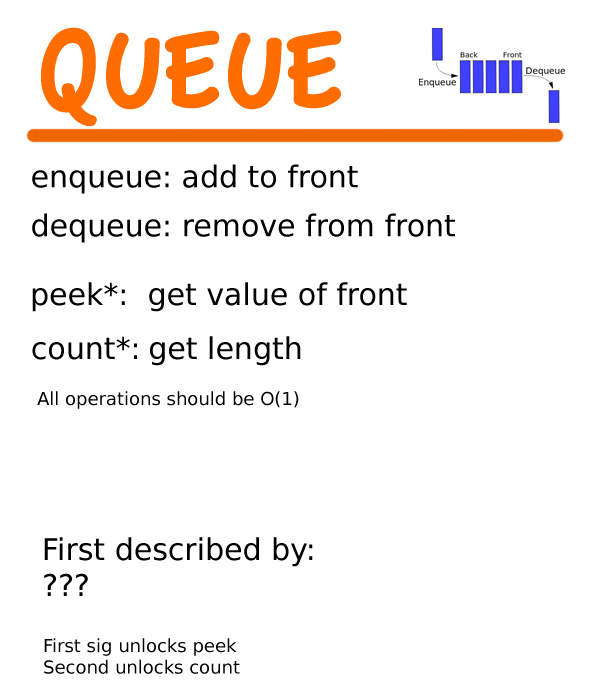
<style>
.page{position:relative;width:600px;height:700px;background:#ffffff}
.page>*{position:absolute;margin:0}
.t1{font:120px "AppleCasual";color:#ff6c00}
.t2{font:30px "BitstreamVeraSans-Roman";color:#000000}
.t3{font:18px "BitstreamVeraSans-Roman";color:#000000}
</style>
<div class="page">
<p class="t1" style="left:40px;top:27px;width:302px;height:99px">QUEUE</p>
<p class="t2" style="left:32px;top:164px;width:326px;height:30px">enqueue: add to front</p>
<p class="t2" style="left:32px;top:213px;width:423px;height:30px">dequeue: remove from front</p>
<p class="t2" style="left:32px;top:282px;width:375px;height:30px">peek*:  get value of front</p>
<p class="t2" style="left:32px;top:336px;width:269px;height:30px">count*: get length</p>
<p class="t3" style="left:37px;top:391px;width:262px;height:18px">All operations should be O(1)</p>
<p class="t2" style="left:44px;top:537px;width:269px;height:59px">First described by:<br>???</p>
<p class="t3" style="left:44px;top:638px;width:196px;height:36px">First sig unlocks peek<br>Second unlocks count</p>
</div>
